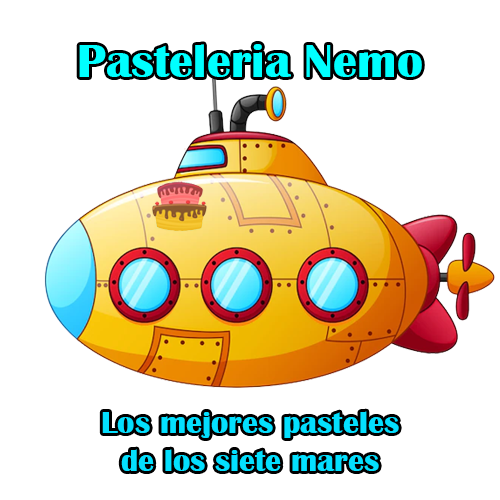
<style>
.page{position:relative;width:500px;height:500px;background:#ffffff}
.page>*{position:absolute;margin:0}
.t1{font:48px "BritannicBold";color:#00ffff}
.t2{font:32px "BritannicBold";color:#04dffe}
</style>
<div class="page">
<p class="t1" style="left:79px;top:44px;width:343px;height:33px">Pasteleria Nemo</p>
<p class="t2" style="left:102px;top:411px;width:297px;height:60px;text-align:center">Los mejores pasteles<br>de los siete mares</p>
</div>
